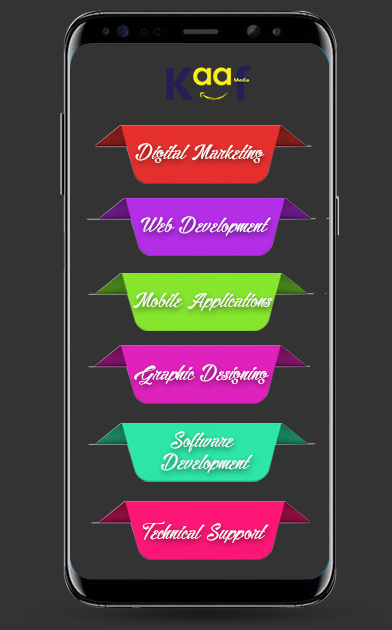
<style>
.page{position:relative;width:392px;height:630px;background:#333333}
.page>*{position:absolute;margin:0}
.t1{font:18.8px "Alisandra-Demo";color:#fbfbf8}
</style>
<div class="page">
<p class="t1" style="left:135px;top:143px;width:130px;height:20px">Digital Marketing</p>
<p class="t1" style="left:141px;top:216px;width:130px;height:20px">Web Development</p>
<p class="t1" style="left:133px;top:292px;width:140px;height:19px">Mobile Applications</p>
<p class="t1" style="left:134px;top:364px;width:135px;height:21px">Graphic Designing</p>
<p class="t1" style="left:161px;top:431px;width:92px;height:42px;text-align:center">Software <br>Development</p>
<p class="t1" style="left:142px;top:521px;width:127px;height:22px">Technical Support</p>
</div>
